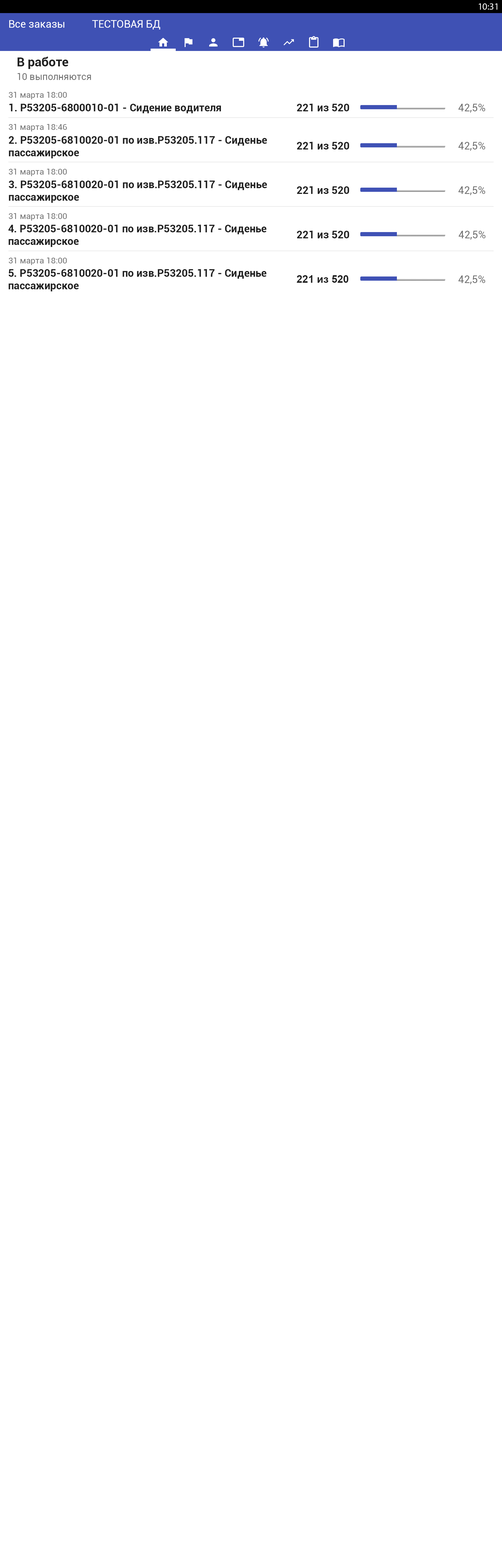
<style>
.page{position:relative;width:502px;height:1568px;background:#ffffff}
.page>*{position:absolute;margin:0}
.t1{font:9.4px "MyriadPro-Regular";color:#ffffff}
.t2{font:10.5px "Roboto-Regular";color:#ffffff}
.t3{font:12.5px "Roboto-Bold";color:#212121}
.t4{font:9.4px "Roboto-Regular";color:#727272}
.t5{font:8.4px "Roboto-Regular";color:#747474}
.t6{font:10.5px "Roboto-Bold";color:#212121}
.t7{font:10.5px "Roboto-Regular";color:#727272}
.t8{font:10.5px "Arial-BoldMT";color:#212121}
</style>
<div class="page">
<p class="t1" style="left:479px;top:3px;width:18px;height:7px">10:31</p>
<p class="t2" style="left:9px;top:20px;width:55px;height:8px">Все заказы</p>
<p class="t2" style="left:92px;top:20px;width:68px;height:10px">ТЕСТОВАЯ БД</p>
<p class="t3" style="left:18px;top:57px;width:50px;height:12px">В работе</p>
<p class="t4" style="left:18px;top:73px;width:73px;height:7px">10 выполняются</p>
<p class="t5" style="left:9px;top:92px;width:58px;height:7px">31 марта 18:00</p>
<p class="t6" style="left:9px;top:103px;width:212px;height:10px">1. P53205-6800010-01 - Сидение водителя</p>
<p class="t6" style="left:297px;top:103px;width:52px;height:8px">221 из 520</p>
<p class="t7" style="left:458px;top:104px;width:27px;height:9px">42,5%</p>
<p class="t5" style="left:9px;top:124px;width:58px;height:7px">31 марта 18:46</p>
<p class="t6" style="left:9px;top:136px;width:258px;height:22px">2. P53205-6810020-01 по изв.P53205.117 - Сиденье<br>пассажирское</p>
<p class="t6" style="left:297px;top:142px;width:52px;height:7px">221 из 520</p>
<p class="t7" style="left:458px;top:142px;width:27px;height:9px">42,5%</p>
<p class="t5" style="left:9px;top:169px;width:58px;height:7px">31 марта 18:00</p>
<p class="t6" style="left:9px;top:180px;width:258px;height:23px">3. P53205-6810020-01 по изв.P53205.117 - Сиденье<br>пассажирское</p>
<p class="t6" style="left:297px;top:186px;width:52px;height:8px">221 из 520</p>
<p class="t7" style="left:458px;top:186px;width:27px;height:9px">42,5%</p>
<p class="t5" style="left:9px;top:213px;width:58px;height:8px">31 марта 18:00</p>
<p class="t6" style="left:8px;top:224px;width:258px;height:23px">4. P53205-6810020-01 по изв.P53205.117 - Сиденье<br>пассажирское</p>
<p class="t6" style="left:297px;top:230px;width:52px;height:8px">221 из 520</p>
<p class="t7" style="left:458px;top:231px;width:27px;height:9px">42,5%</p>
<p class="t5" style="left:9px;top:257px;width:58px;height:8px">31 марта 18:00</p>
<p class="t6" style="left:9px;top:269px;width:257px;height:22px">5. P53205-6810020-01 по изв.P53205.117 - Сиденье<br>пассажирское</p>
<p class="t8" style="left:297px;top:275px;width:51px;height:8px">221 из 520</p>
<p class="t7" style="left:458px;top:275px;width:27px;height:9px">42,5%</p>
</div>
